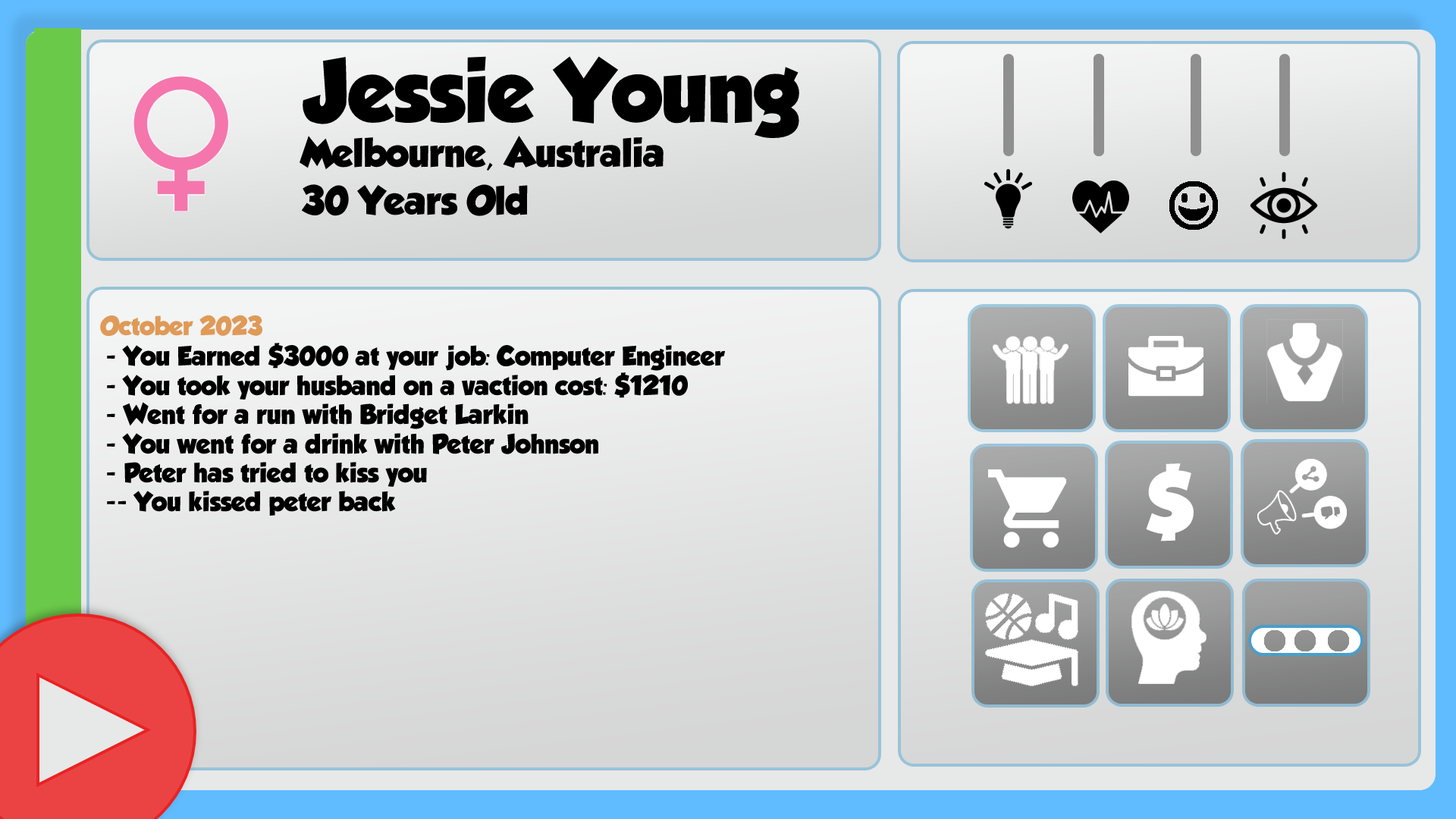
<style>
.page{position:relative;width:1456px;height:819px}
.page>*{position:absolute;margin:0}
.t1{font:78.9px "GROBOLD";color:#000000}
.t2{font:35.6px "GROBOLD";color:#000000}
.t3{font:23.5px "GROBOLD";color:#df9a58}
.t4{font:24.3px "GROBOLD";color:#000000}
</style>
<div class="page">
<p class="t1" style="left:302px;top:56px;width:497px;height:83px">Jessie Young</p>
<p class="t2" style="left:299px;top:135px;width:365px;height:36px">Melbourne, Australia</p>
<p class="t2" style="left:301px;top:184px;width:227px;height:32px">30 Years Old</p>
<p class="t3" style="left:100px;top:315px;width:163px;height:22px">October 2023</p>
<p class="t4" style="left:107px;top:343px;width:619px;height:173px">- You Earned $3000 at your job: Computer Engineer<br>- You took your husband on a vaction cost: $1210<br>- Went for a run with Bridget Larkin<br>- You went for a drink with Peter Johnson<br>- Peter has tried to kiss you<br>-- You kissed peter back</p>
</div>
